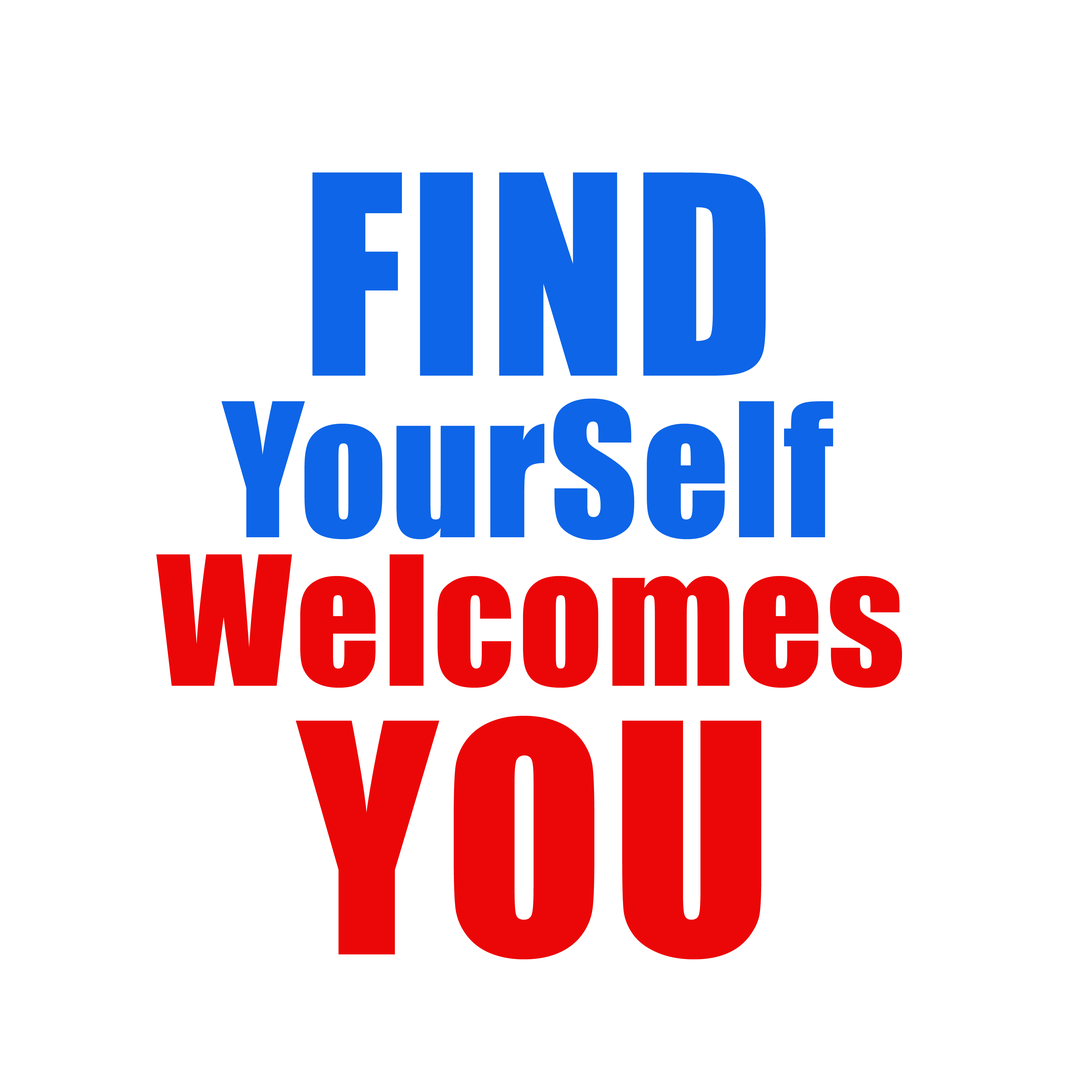
<style>
.page{position:relative;width:1092px;height:1092px;background:#ffffff}
.page>*{position:absolute;margin:0}
.t1{font:257px "Impact";letter-spacing:0.02em;color:#0e65e7}
.t2{font:172px "Impact";letter-spacing:0.02em;color:#0e65e7}
.t3{font:166.4px "Impact";letter-spacing:0.02em;color:#eb0707}
.t4{font:295.7px "Impact";letter-spacing:0.02em;color:#eb0707}
</style>
<div class="page">
<p class="t1" style="left:312px;top:172px;width:454px;height:204px">FIND</p>
<p class="t2" style="left:221px;top:398px;width:612px;height:142px">YourSelf</p>
<p class="t3" style="left:156px;top:554px;width:746px;height:134px">Welcomes</p>
<p class="t4" style="left:296px;top:716px;width:465px;height:243px">YOU</p>
</div>
